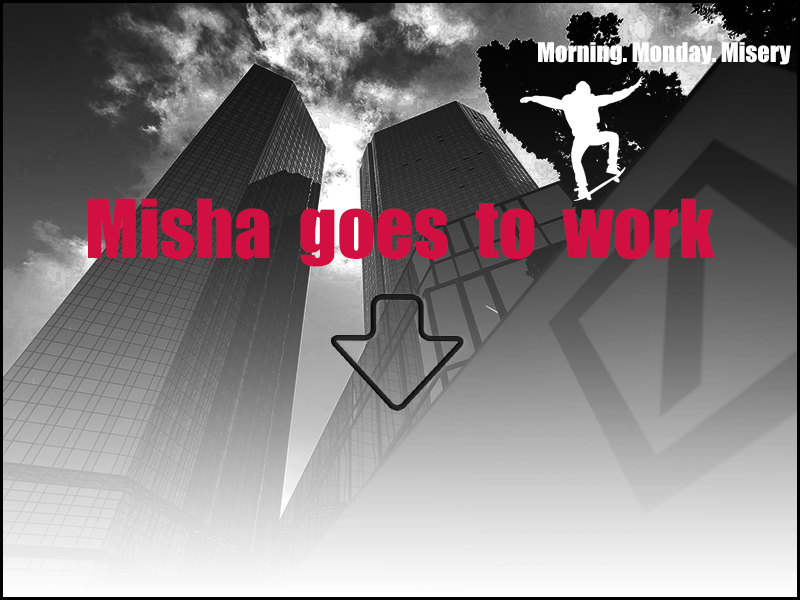
<style>
.page{position:relative;width:800px;height:600px}
.page>*{position:absolute;margin:0}
.t1{font:25px "Impact";color:#ffffff}
.t2{font:75px "Impact";color:#d20f41}
</style>
<div class="page">
<p class="t1" style="left:538px;top:42px;width:253px;height:23px">Morning. Monday. Misery</p>
<p class="t2" style="left:88px;top:198px;width:627px;height:69px">Misha  goes  to  work</p>
</div>
